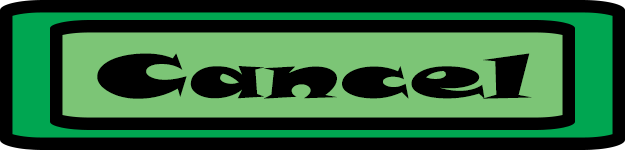
<style>
.page{position:relative;width:625px;height:150px;background:#000000}
.page>*{position:absolute;margin:0}
.t1{font:60px "SnapITC-Regular";color:#000000;scale:2 1}
</style>
<div class="page">
<p class="t1" style="left:97px;top:53px;width:435px;height:46px">Cancel</p>
</div>
